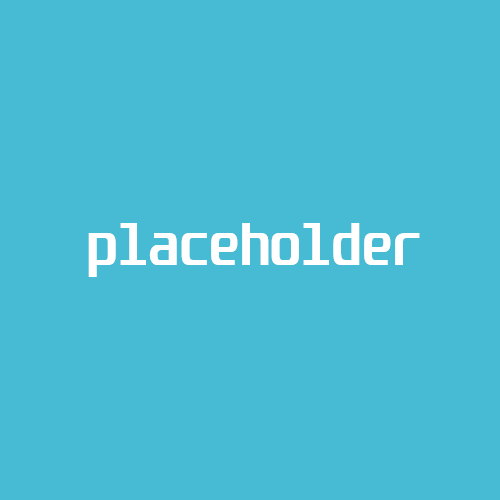
<style>
.page{position:relative;width:500px;height:500px;background:#47bad4}
.page>*{position:absolute;margin:0}
.t1{font:50px "Unispace-Bold";color:#ffffff}
</style>
<div class="page">
<p class="t1" style="left:88px;top:223px;width:332px;height:54px">placeholder</p>
</div>
